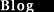
<style>
.page{position:relative;width:54px;height:12px;background:#000000}
.page>*{position:absolute;margin:0}
.t1{font:14px "Georgia";letter-spacing:0.1em;color:#ffffff;font-weight:bold}
</style>
<div class="page">
<p class="t1" style="left:0px;top:0px;width:34px;height:14px">Blog</p>
</div>
